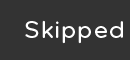
<style>
.page{position:relative;width:130px;height:60px;background:#333333}
.page>*{position:absolute;margin:0}
.t1{font:24.5px "PollyRounded-Regular";color:#ffffff}
</style>
<div class="page">
<p class="t1" style="left:25px;top:20px;width:98px;height:24px">Skipped</p>
</div>
